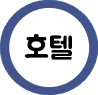
<style>
.page{position:relative;width:98px;height:95px;background:#ffffff}
.page>*{position:absolute;margin:0}
.t1{font:30px "BMJUA";color:#000000}
</style>
<div class="page">
<p class="t1" style="left:24px;top:34px;width:48px;height:26px">호텔</p>
</div>
